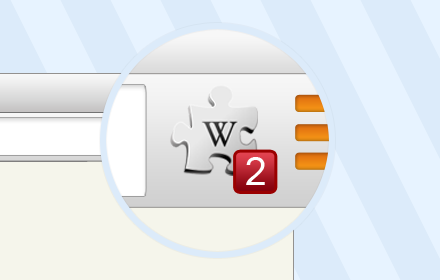
<style>
.page{position:relative;width:440px;height:280px;background:#dcebfa}
.page>*{position:absolute;margin:0}
.t1{font:39px "ArialMT";color:#ffffff}
</style>
<div class="page">
<p class="t1" style="left:246px;top:157px;width:19px;height:28px">2</p>
</div>
